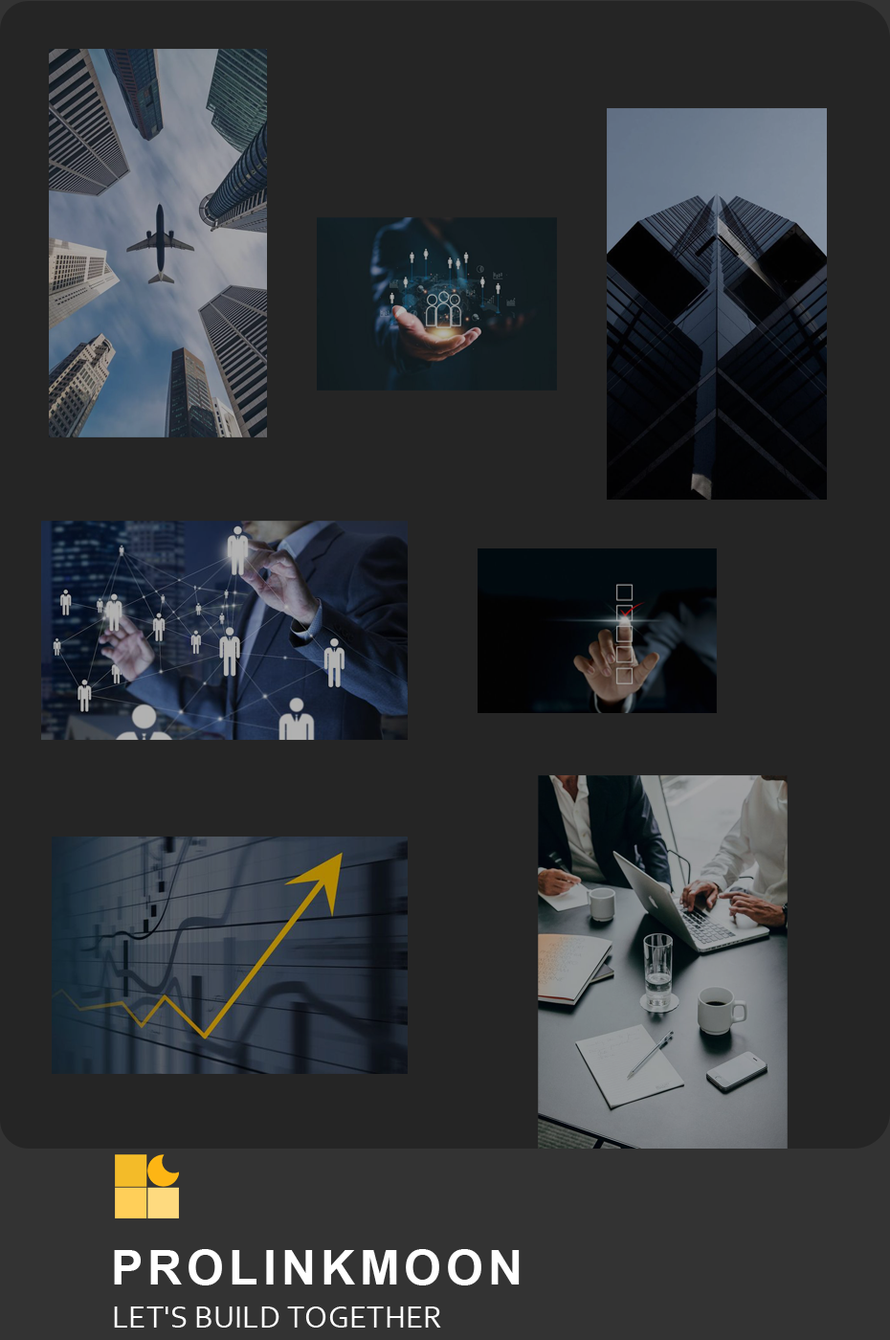
<style>
.page{position:relative;width:890px;height:1340px;background:#252525}
.page>*{position:absolute;margin:0}
.t1{font:47.8px "Arial-BoldMT";letter-spacing:0.1em;color:#ffffff}
.t2{font:31.9px "Corbel";color:#ffffff}
</style>
<div class="page">
<p class="t1" style="left:114px;top:1249px;width:406px;height:36px">PROLINKMOON</p>
<p class="t2" style="left:114px;top:1306px;width:327px;height:21px">LET'S BUILD TOGETHER</p>
</div>
